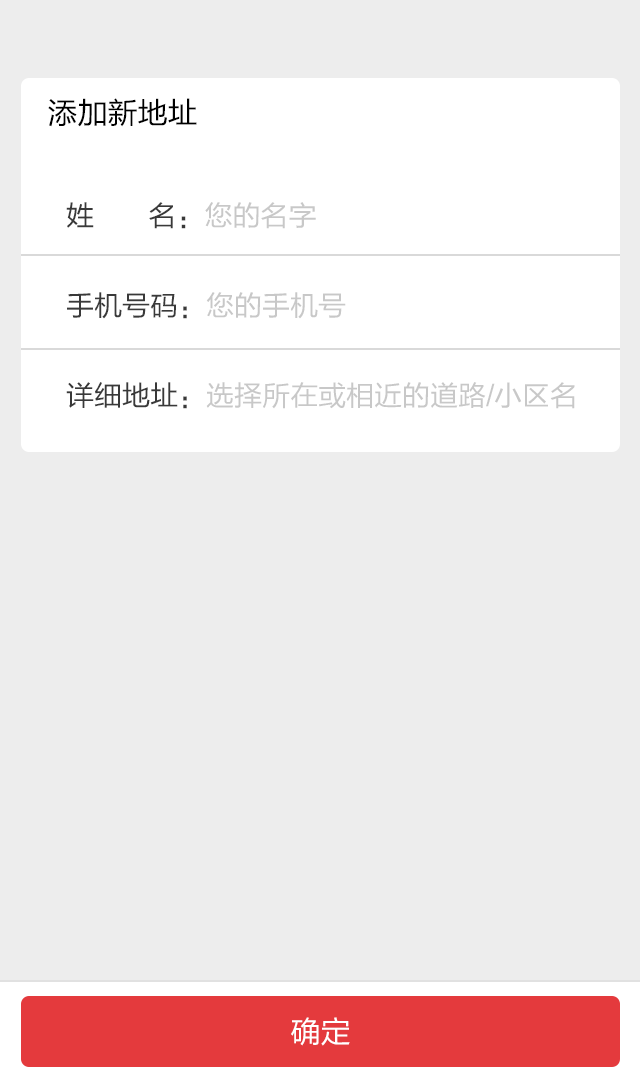
<style>
.page{position:relative;width:640px;height:1080px;background:#ededed}
.page>*{position:absolute;margin:0}
.t1{font:30px "FZLTHJW--GB1-0";color:#000000}
.t2{font:28px/36px "FZLTHJW--GB1-0";color:#c8c8c8}
.t3{font:28px/90px "FZLTHJW--GB1-0";color:#393939}
.t4{font:28px/90px "FZLTHJW--GB1-0";color:#c8c8c8}
.t5{font:30px "FZLTHJW--GB1-0";color:#ffffff}
</style>
<div class="page">
<p class="t1" style="left:48px;top:98px;width:149px;height:29px">添加新地址</p>
<p class="t2" style="left:66px;top:202px;width:509px;height:207px"><span class="t3">姓       名：</span><span class="t4">您的名字<br></span><span class="t3">手机号码：</span><span class="t4">您的手机号<br></span><span class="t3">详细地址：</span>选择所在或相近的道路/小区名</p>
<p class="t5" style="left:291px;top:1017px;width:59px;height:29px">确定</p>
</div>
